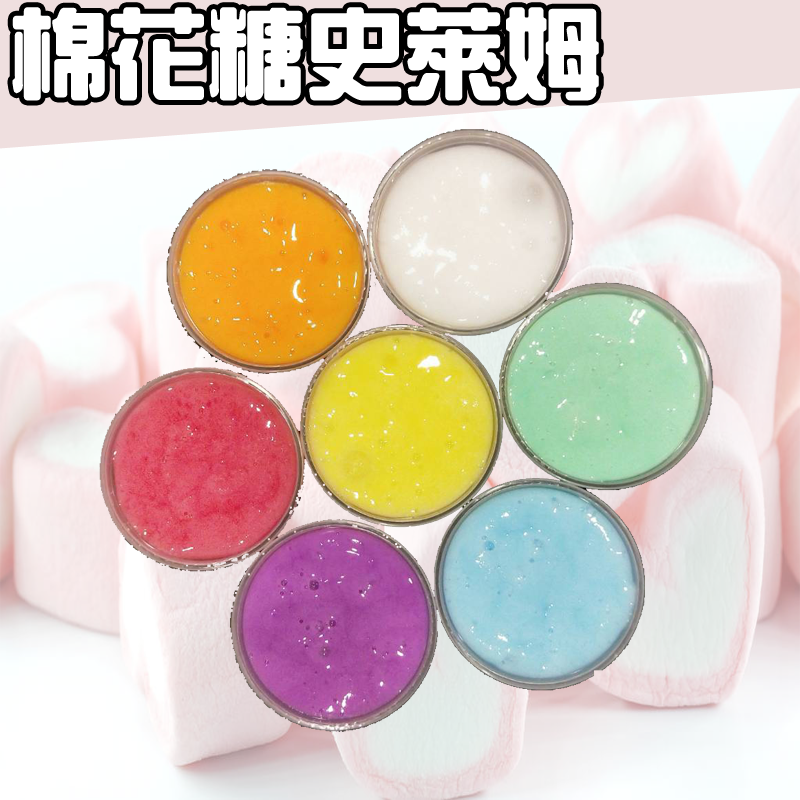
<style>
.page{position:relative;width:800px;height:800px}
.page>*{position:absolute;margin:0}
.t1{font:96px "HanWangZonYi";color:#ffffff;font-weight:bold}
</style>
<div class="page">
<p class="t1" style="left:12px;top:7px;width:587px;height:94px">棉花糖史萊姆</p>
</div>
